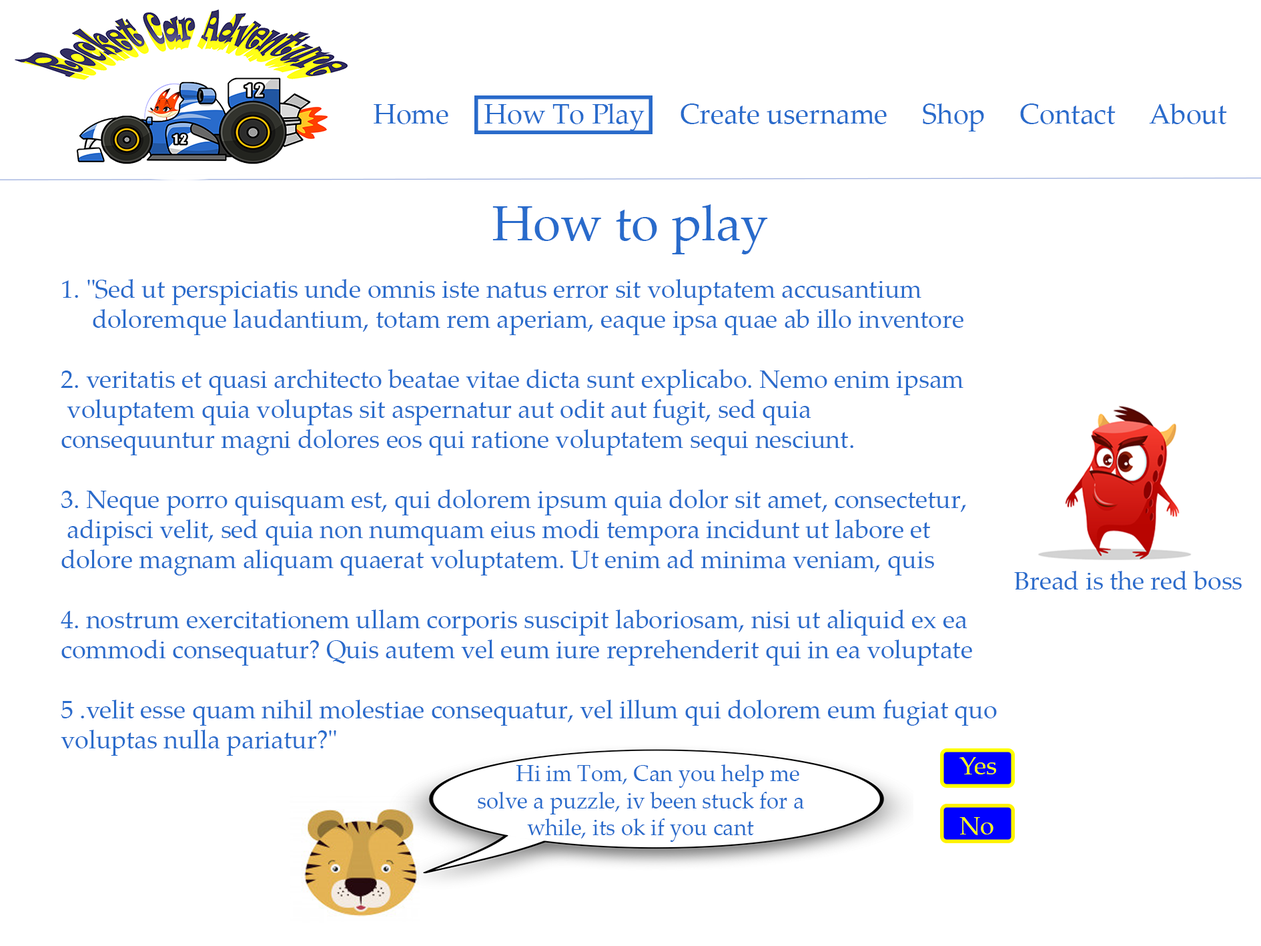
<style>
.page{position:relative;width:1261px;height:946px;background:#ffffff}
.page>*{position:absolute;margin:0}
.t1{font:27.8px "PalatinoLinotype-Roman";color:#296bcb}
.t2{font:50px "PalatinoLinotype-Roman";color:#296bcb}
.t3{font:25px "PalatinoLinotype-Roman";color:#296bcb}
.t4{font:22.5px "PalatinoLinotype-Roman";color:#296bcb}
</style>
<div class="page">
<p class="t1" style="left:374px;top:103px;width:853px;height:28px">Home     How To Play     Create username     Shop     Contact     About</p>
<p class="t2" style="left:492px;top:204px;width:276px;height:50px">How to play</p>
<p class="t3" style="left:61px;top:279px;width:936px;height:476px">1. "Sed ut perspiciatis unde omnis iste natus error sit voluptatem accusantium <br>     doloremque laudantium, totam rem aperiam, eaque ipsa quae ab illo inventore<br> <br>2. veritatis et quasi architecto beatae vitae dicta sunt explicabo. Nemo enim ipsam<br> voluptatem quia voluptas sit aspernatur aut odit aut fugit, sed quia <br>consequuntur magni dolores eos qui ratione voluptatem sequi nesciunt. <br><br>3. Neque porro quisquam est, qui dolorem ipsum quia dolor sit amet, consectetur,<br> adipisci velit, sed quia non numquam eius modi tempora incidunt ut labore et <br>dolore magnam aliquam quaerat voluptatem. Ut enim ad minima veniam, quis <br><br>4. nostrum exercitationem ullam corporis suscipit laboriosam, nisi ut aliquid ex ea <br>commodi consequatur? Quis autem vel eum iure reprehenderit qui in ea voluptate<br> <br>5 .velit esse quam nihil molestiae consequatur, vel illum qui dolorem eum fugiat quo <br>voluptas nulla pariatur?"</p>
<p class="t3" style="left:1014px;top:571px;width:228px;height:18px">Bread is the red boss</p>
<p class="t4" style="left:478px;top:764px;width:326px;height:77px">Hi im Tom, Can you help me <br>solve a puzzle, iv been stuck for a <br>         while, its ok if you cant</p>
</div>
